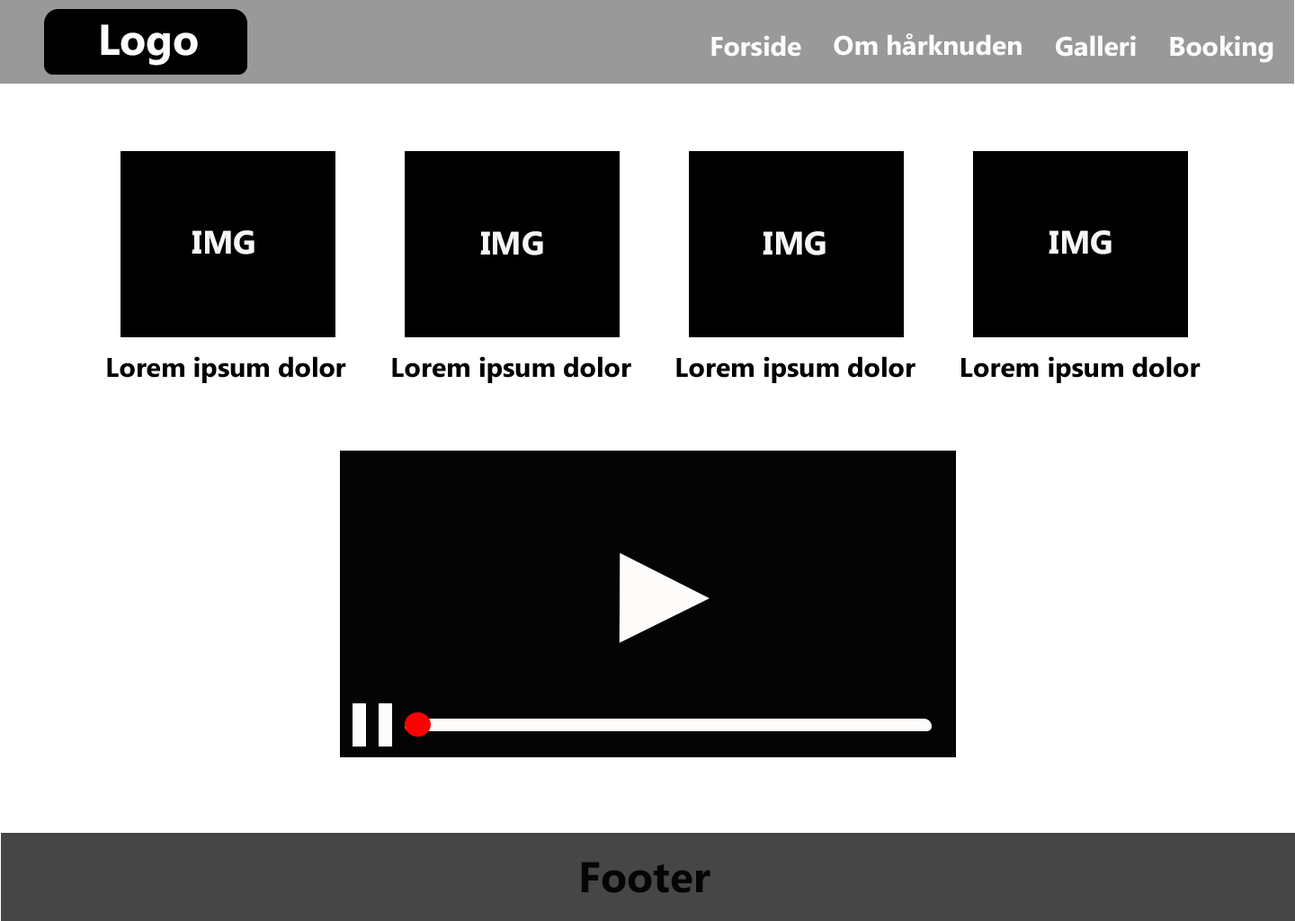
<style>
.page{position:relative;width:1295px;height:921px;background:#ffffff}
.page>*{position:absolute;margin:0}
.t1{font:43.2px "Ebrima-Bold";color:#fdfcfc}
.t2{font:27px "Ebrima-Bold";color:#fdfcfc}
.t3{font:32.4px "Ebrima-Bold";color:#f7f5f5}
.t4{font:27px "Ebrima-Bold";color:#010101}
.t5{font:43.2px "Ebrima-Bold";color:#050505}
</style>
<div class="page">
<p class="t1" style="left:101px;top:24px;width:97px;height:42px">Logo</p>
<p class="t2" style="left:711px;top:35px;width:90px;height:22px">Forside</p>
<p class="t2" style="left:834px;top:33px;width:188px;height:23px">Om hårknuden</p>
<p class="t2" style="left:1056px;top:35px;width:80px;height:22px">Galleri</p>
<p class="t2" style="left:1170px;top:35px;width:103px;height:28px">Booking</p>
<p class="t3" style="left:192px;top:230px;width:62px;height:24px">IMG</p>
<p class="t3" style="left:480px;top:231px;width:63px;height:24px">IMG</p>
<p class="t3" style="left:763px;top:231px;width:63px;height:24px">IMG</p>
<p class="t3" style="left:1049px;top:230px;width:62px;height:24px">IMG</p>
<p class="t4" style="left:107px;top:356px;width:239px;height:27px">Lorem ipsum dolor</p>
<p class="t4" style="left:392px;top:356px;width:239px;height:27px">Lorem ipsum dolor</p>
<p class="t4" style="left:676px;top:356px;width:239px;height:27px">Lorem ipsum dolor</p>
<p class="t4" style="left:961px;top:356px;width:240px;height:27px">Lorem ipsum dolor</p>
<p class="t5" style="left:581px;top:861px;width:129px;height:32px">Footer</p>
</div>
